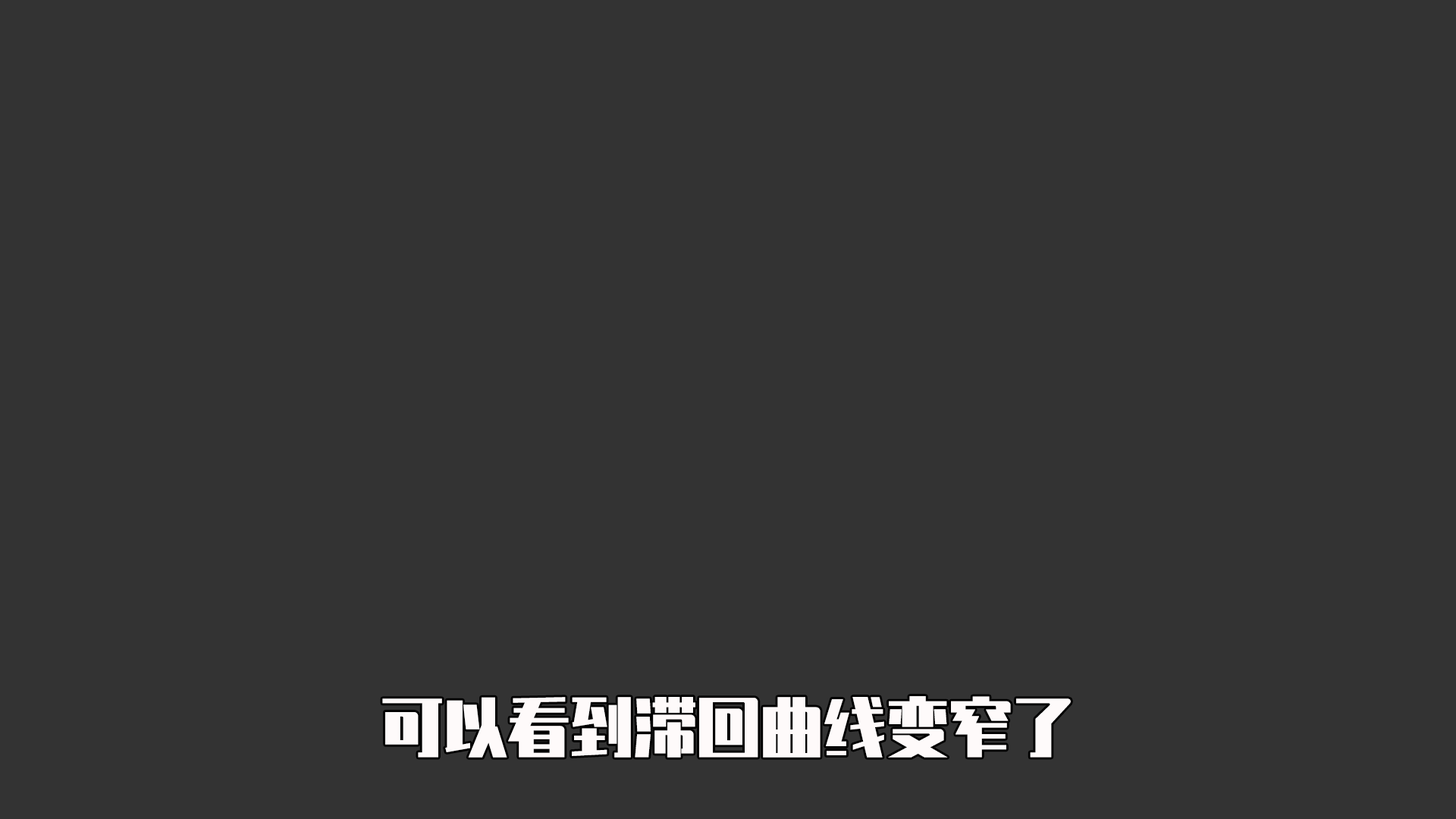
<style>
.page{position:relative;width:1456px;height:819px;background:#333333}
.page>*{position:absolute;margin:0}
.t1{font:63.2px "ZhenyanGB-Regular";color:#fefafa}
</style>
<div class="page">
<p class="t1" style="left:382px;top:696px;width:689px;height:62px">可以看到滞回曲线变窄了</p>
</div>
